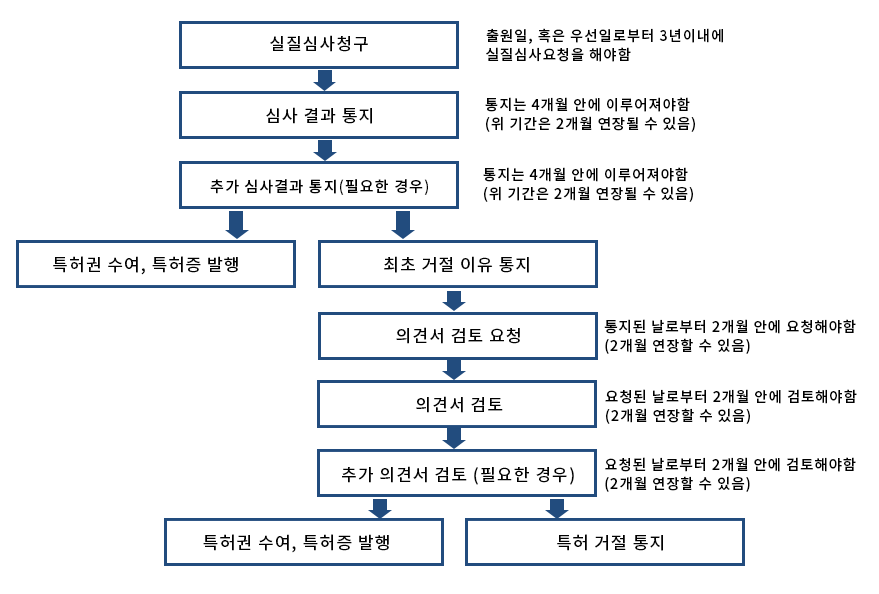
<style>
.page{position:relative;width:879px;height:594px;background:#ffffff}
.page>*{position:absolute;margin:0}
.t1{font:14.5px/19.1px "NotoSansCJKkr-Medium";letter-spacing:0.06em;color:#010101}
.t2{font:17.1px "NotoSansCJKkr-Medium";letter-spacing:0.06em;color:#010101}
.t3{font:15.1px "NotoSansCJKkr-Medium";letter-spacing:0.06em;color:#010101}
</style>
<div class="page">
<p class="t1" style="left:486px;top:28px;width:237px;height:34px">출원일, 혹은 우선일로부터 3년이내에 <br>실질심사요청을 해야함</p>
<p class="t2" style="left:270px;top:35px;width:98px;height:17px">실질심사청구</p>
<p class="t1" style="left:485px;top:97px;width:210px;height:35px">통지는 4개월 안에 이루어져야함<br>(위 기간은 2개월 연장될 수 있음)</p>
<p class="t2" style="left:266px;top:107px;width:106px;height:17px">심사 결과 통지</p>
<p class="t1" style="left:483px;top:167px;width:210px;height:35px">통지는 4개월 안에 이루어져야함<br>(위 기간은 2개월 연장될 수 있음)</p>
<p class="t3" style="left:210px;top:179px;width:218px;height:16px">추가 심사결과 통지(필요한 경우)</p>
<p class="t2" style="left:53px;top:256px;width:185px;height:19px">특허권 수여, 특허증 발행</p>
<p class="t2" style="left:384px;top:256px;width:145px;height:17px">최초 거절 이유 통지</p>
<p class="t2" style="left:396px;top:327px;width:124px;height:17px">의견서 검토 요청</p>
<p class="t1" style="left:604px;top:319px;width:252px;height:35px">통지된 날로부터 2개월 안에 요청해야함<br>(2개월 연장할 수 있음)</p>
<p class="t1" style="left:605px;top:389px;width:252px;height:35px">요청된 날로부터 2개월 안에 검토해야함<br>(2개월 연장할 수 있음)</p>
<p class="t2" style="left:416px;top:396px;width:87px;height:17px">의견서 검토</p>
<p class="t1" style="left:605px;top:457px;width:251px;height:35px">요청된 날로부터 2개월 안에 검토해야함<br>(2개월 연장할 수 있음)</p>
<p class="t2" style="left:342px;top:466px;width:232px;height:19px">추가 의견서 검토 (필요한 경우)</p>
<p class="t2" style="left:203px;top:534px;width:186px;height:19px">특허권 수여, 특허증 발행</p>
<p class="t2" style="left:557px;top:534px;width:106px;height:17px">특허 거절 통지</p>
</div>
